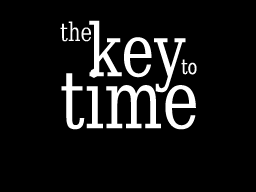
<style>
.page{position:relative;width:256px;height:192px;background:#000000}
.page>*{position:absolute;margin:0}
.t1{font:25.6px "DejaVuSerifCondensed";color:#ffffff;scale:0.85 1}
.t2{font:72.5px "DejaVuSerifCondensed";color:#ffffff;scale:0.85 1}
.t3{font:21px "DejaVuSerifCondensed";color:#ffffff;scale:0.85 1}
.t4{font:80.3px "DejaVuSerifCondensed";color:#ffffff;scale:0.85 1}
</style>
<div class="page">
<p class="t1" style="left:60px;top:21px;width:31px;height:21px">the</p>
<p class="t2" style="left:89px;top:20px;width:97px;height:73px">key</p>
<p class="t3" style="left:181px;top:59px;width:16px;height:16px">to</p>
<p class="t4" style="left:61px;top:68px;width:135px;height:62px">time</p>
</div>
